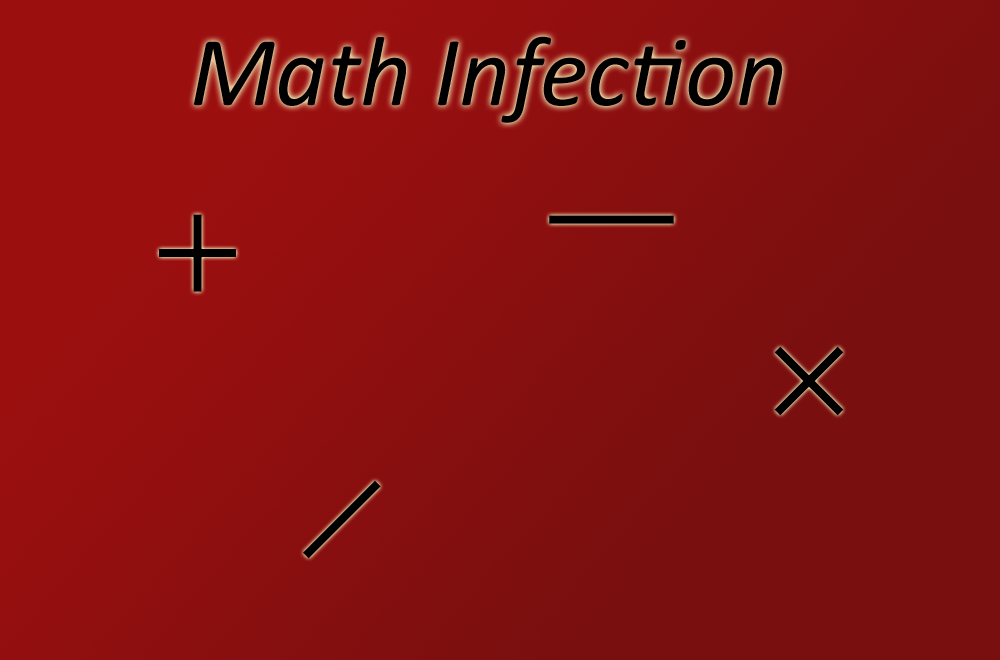
<style>
.page{position:relative;width:1000px;height:660px}
.page>*{position:absolute;margin:0}
.t1{font:100px "Calibri-Italic";color:#000000}
</style>
<div class="page">
<p class="t1" style="left:194px;top:36px;width:589px;height:87px">Math Infection</p>
</div>
